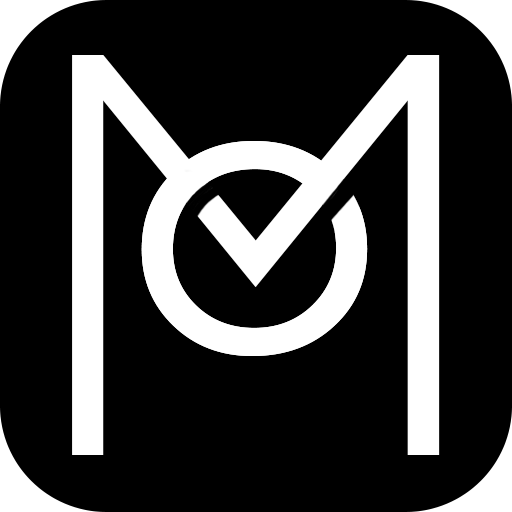
<style>
.page{position:relative;width:512px;height:512px;background:#000000}
.page>*{position:absolute;margin:0}
.t1{font:585.7px "GillSans-Light";color:#ffffff}
.t2{font:307.2px "GillSans";color:#ffffff}
</style>
<div class="page">
<p class="t1" style="left:72px;top:55px;width:368px;height:400px">M</p>
<p class="t2" style="left:141px;top:141px;width:227px;height:215px">O</p>
</div>
